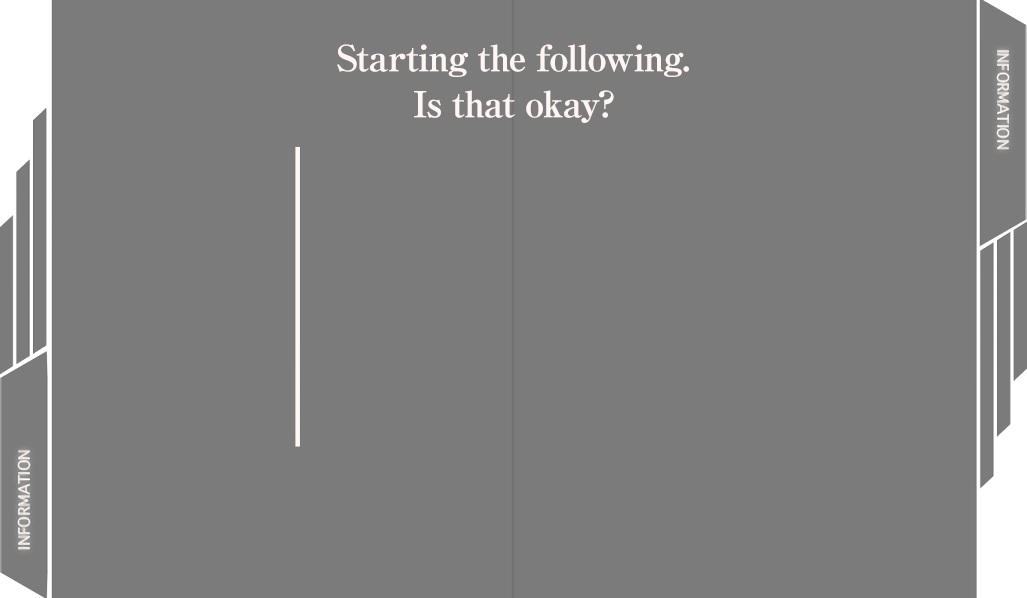
<style>
.page{position:relative;width:1027px;height:598px;background:#7b7b7b}
.page>*{position:absolute;margin:0}
.t1{font:36px/46px "RyuminPro-ExBold";letter-spacing:-0.04em;color:#fff5f3}
</style>
<div class="page">
<p class="t1" style="left:337px;top:44px;width:352px;height:79px;text-align:center">Starting the following.<br>Is that okay?</p>
</div>
